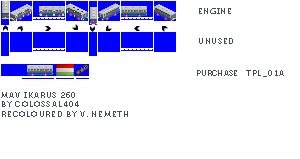
<style>
.page{position:relative;width:300px;height:159px;background:#ffffff}
.page>*{position:absolute;margin:0}
.t1{font:8px "Museo700-Regular";letter-spacing:0.075em;color:#444c5c;text-transform:uppercase}
.t2{font:8px "Museo700-Regular";color:#444c5c;text-transform:uppercase}
.t3{font:8px "Museo700-Regular";letter-spacing:0.1em;color:#444c5c;text-transform:uppercase}
</style>
<div class="page">
<p class="t1" style="left:199px;top:8px;width:32px;height:6px">Engine</p>
<p class="t1" style="left:199px;top:38px;width:34px;height:6px">Unused</p>
<p class="t2" style="left:197px;top:70px;width:40px;height:6px">Purchase</p>
<p class="t3" style="left:246px;top:70px;width:38px;height:7px">tpl_01a</p>
<p class="t3" style="left:1px;top:92px;width:127px;height:25px">mav ikarus 260<br>by colossal404<br>recoloured by v. nemeth</p>
</div>
